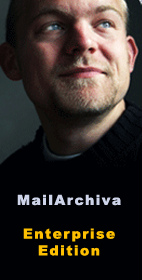
<style>
.page{position:relative;width:142px;height:280px;background:#000104}
.page>*{position:absolute;margin:0}
.t1{font:14px "Arial-Black";letter-spacing:0.1em;color:#ffc000}
.t2{font:14px "Arial-Black";letter-spacing:0.1em;color:#ced4e9}
</style>
<div class="page">
<p class="t1" style="left:17px;top:194px;width:104px;height:62px;text-align:center"><span class="t2">MailArchiva<br><br></span>Enterprise<br>Edition</p>
</div>
